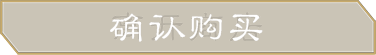
<style>
.page{position:relative;width:376px;height:55px;background:#cac4b6}
.page>*{position:absolute;margin:0}
.t1{font:37.5px "FZLBJW--GB1-0";letter-spacing:0.05em;color:#ffffff}
</style>
<div class="page">
<p class="t1" style="left:110px;top:13px;width:153px;height:29px">确认购买</p>
</div>
